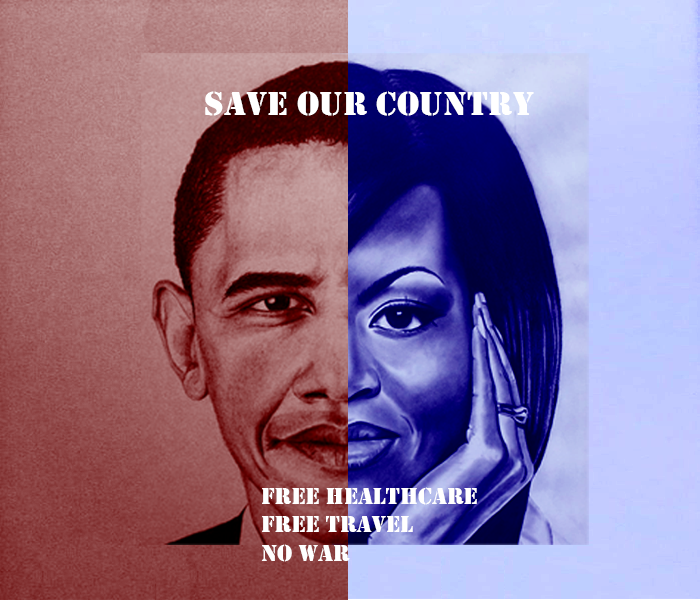
<style>
.page{position:relative;width:700px;height:600px}
.page>*{position:absolute;margin:0}
.t1{font:35.3px "Stencil";color:#ffffff}
.t2{font:24px "Stencil";color:#ffffff}
</style>
<div class="page">
<p class="t1" style="left:205px;top:91px;width:329px;height:25px">Save Our Country</p>
<p class="t2" style="left:261px;top:487px;width:216px;height:75px">Free healthcare<br>Free Travel<br>No war</p>
</div>
